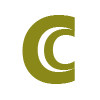
<style>
.page{position:relative;width:100px;height:100px;background:#ffffff}
.page>*{position:absolute;margin:0}
.t1{font:89.1px "MicrosoftYaHeiUI-Bold";color:#898818}
.t2{font:51.6px "MicrosoftYaHeiUI-Bold";color:#898818}
</style>
<div class="page">
<p class="t1" style="left:22px;top:15px;width:53px;height:69px">C</p>
<p class="t2" style="left:44px;top:29px;width:31px;height:41px">C</p>
</div>
